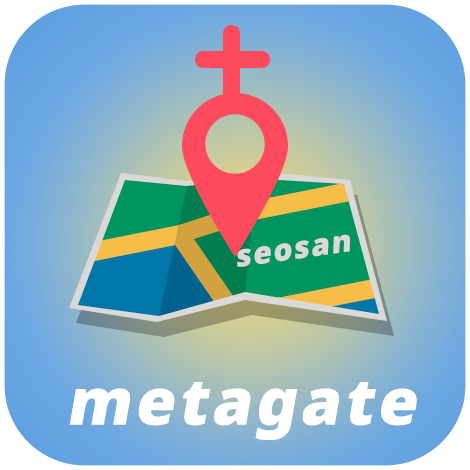
<style>
.page{position:relative;width:470px;height:470px}
.page>*{position:absolute;margin:0}
.t1{font:30px "NotoSans-Black";letter-spacing:0.06em;color:#dad9d7;font-style:italic}
.t2{font:64px "NotoSans-Black";letter-spacing:0.06em;color:#ffffff;font-style:italic}
</style>
<div class="page">
<p class="t1" style="left:237px;top:234px;width:113px;height:33px;rotate:-8deg">seosan</p>
<p class="t2" style="left:69px;top:382px;width:348px;height:58px">metagate</p>
</div>
